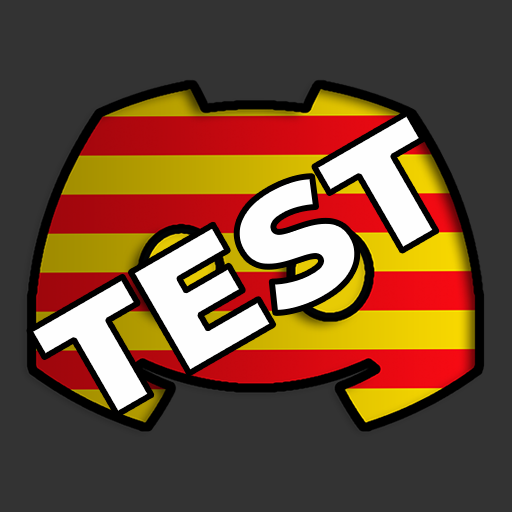
<style>
.page{position:relative;width:512px;height:512px;background:#333333}
.page>*{position:absolute;margin:0}
.t1{font:166.7px "Montserrat-Black";color:#fefefe}
</style>
<div class="page">
<p class="t1" style="left:29px;top:112px;width:408px;height:303px;rotate:-30deg">TEST</p>
</div>
